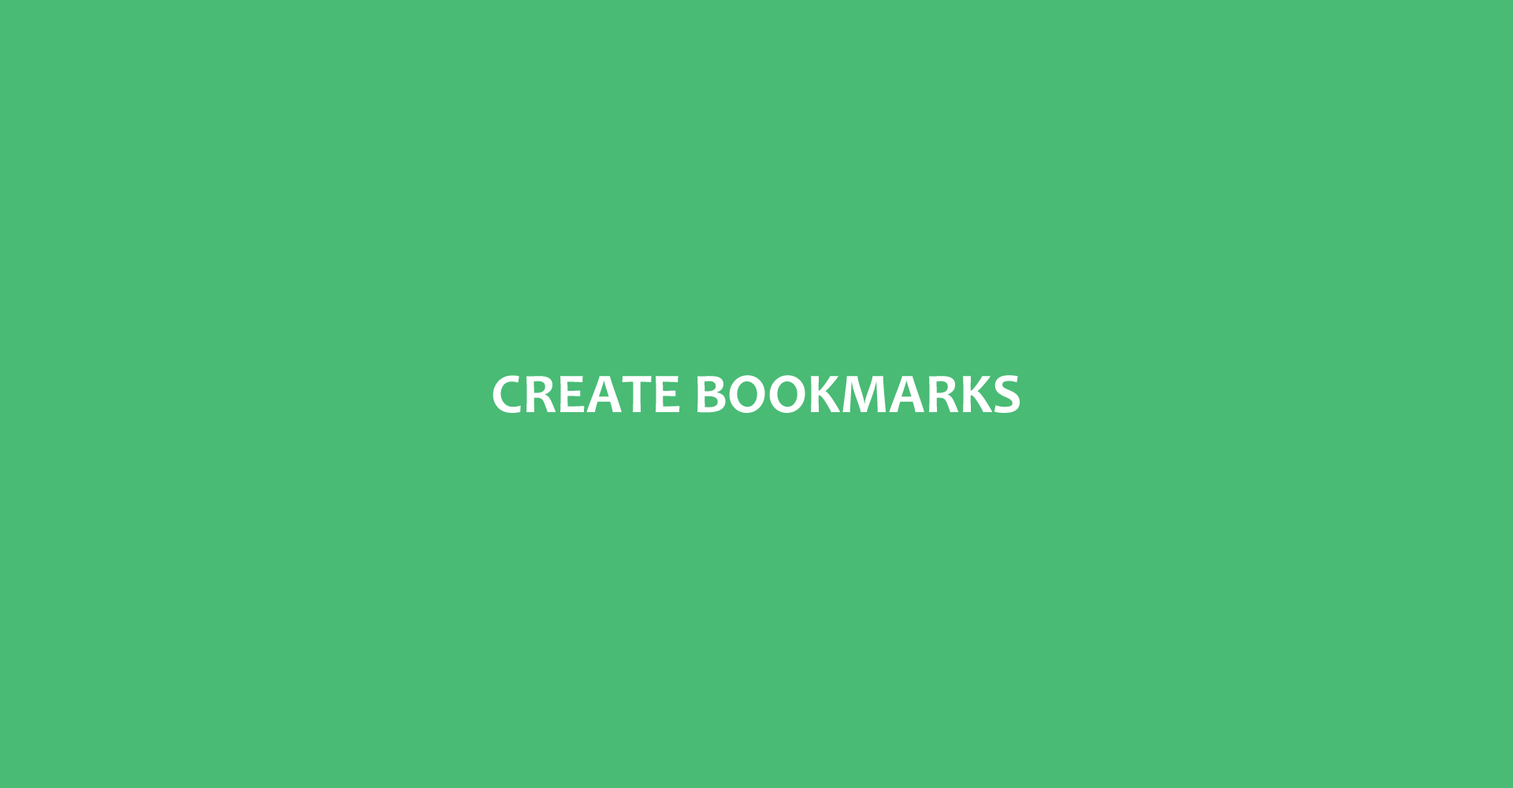
<style>
.page{position:relative;width:1513px;height:788px;background:#49bb75}
.page>*{position:absolute;margin:0}
.t1{font:56.7px "Candara-Bold";color:#ffffff;text-transform:uppercase}
</style>
<div class="page">
<p class="t1" style="left:493px;top:375px;width:527px;height:38px">Create bookmarks</p>
</div>
